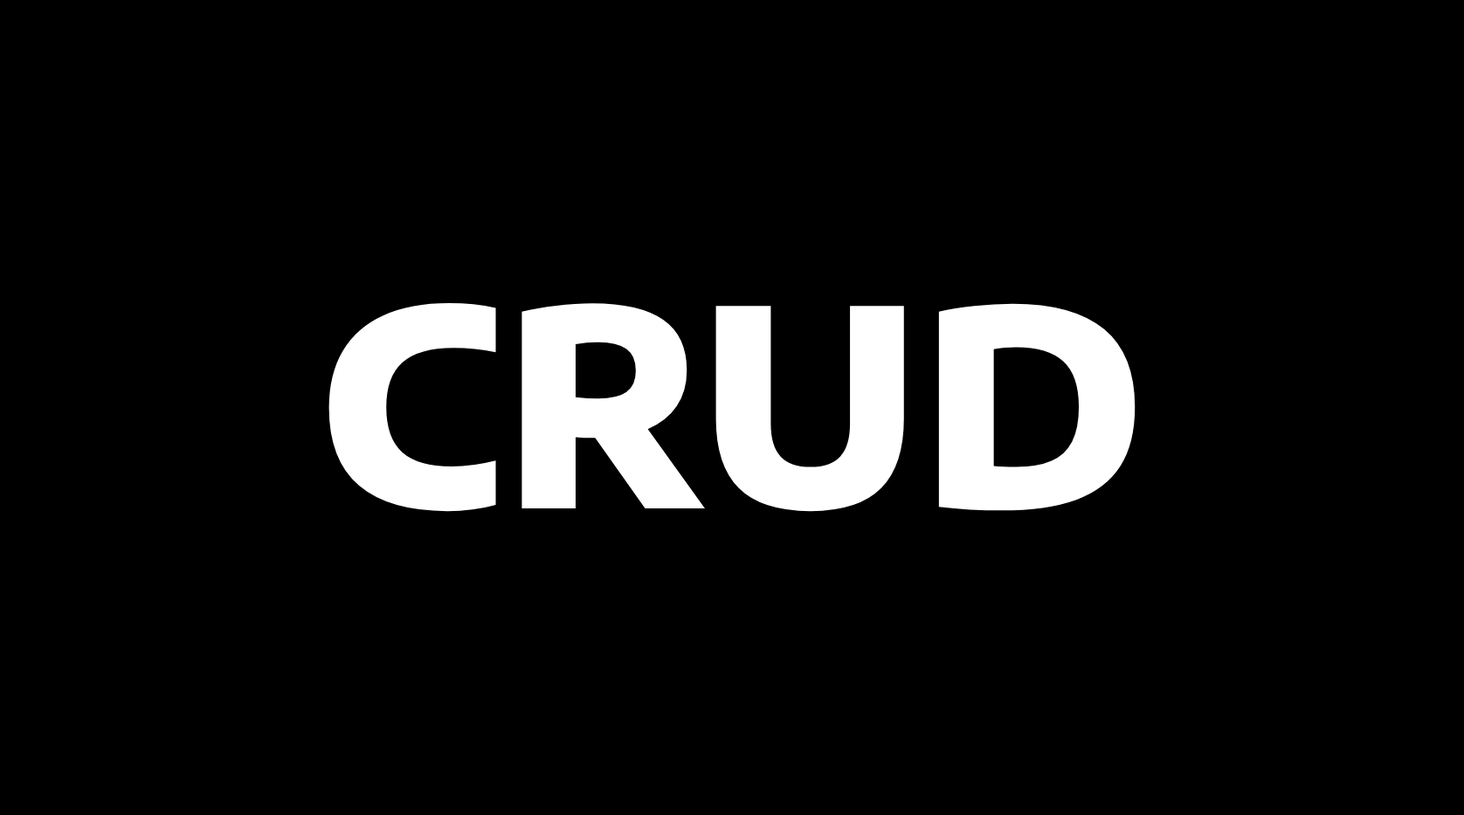
<style>
.page{position:relative;width:1464px;height:815px;background:#000000}
.page>*{position:absolute;margin:0}
.t1{font:273.5px "EncodeSansSemiExpanded-ExtraBold";color:#ffffff}
</style>
<div class="page">
<p class="t1" style="left:328px;top:303px;width:807px;height:209px">CRUD</p>
</div>
